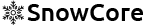
<style>
.page{position:relative;width:148px;height:25px;background:#ffffff}
.page>*{position:absolute;margin:0}
.t1{font:25px "Ubuntu-Medium";color:#000000}
</style>
<div class="page">
<p class="t1" style="left:27px;top:4px;width:116px;height:17px">SnowCore</p>
</div>
